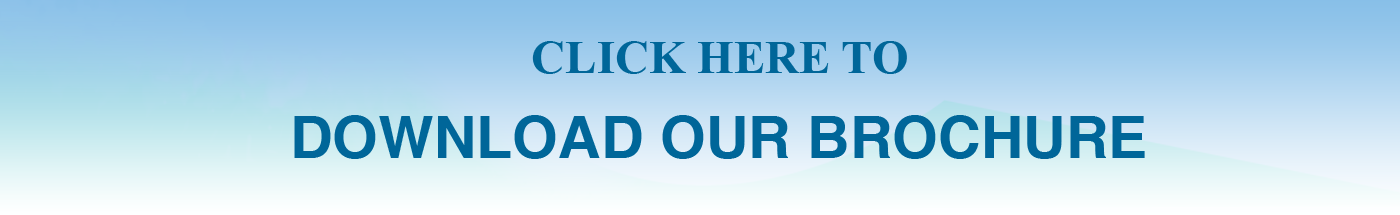
<style>
.page{position:relative;width:1400px;height:215px}
.page>*{position:absolute;margin:0}
.t1{font:47px "TimesNewRomanPS-BoldMT";color:#006699}
.t2{font:58.9px "Helvetica-Bold";color:#006699}
</style>
<div class="page">
<p class="t1" style="left:532px;top:41px;width:375px;height:33px">CLICK HERE TO</p>
<p class="t2" style="left:294px;top:115px;width:851px;height:44px">DOWNLOAD OUR BROCHURE</p>
</div>
